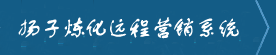
<style>
.page{position:relative;width:276px;height:55px;background:#135c86}
.page>*{position:absolute;margin:0}
.t1{font:24px "FZSTK--GBK1-0";letter-spacing:-0.075em;color:#ffffff}
</style>
<div class="page">
<p class="t1" style="left:18px;top:17px;width:221px;height:22px">扬子炼化远程营销系统</p>
</div>
